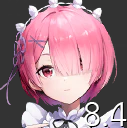
<style>
.page{position:relative;width:127px;height:128px;background:#333333}
.page>*{position:absolute;margin:0}
.t1{font:50px "THSarabunNew";color:#ffffff}
</style>
<div class="page">
<p class="t1" style="left:84px;top:102px;width:43px;height:24px">8.4</p>
</div>
